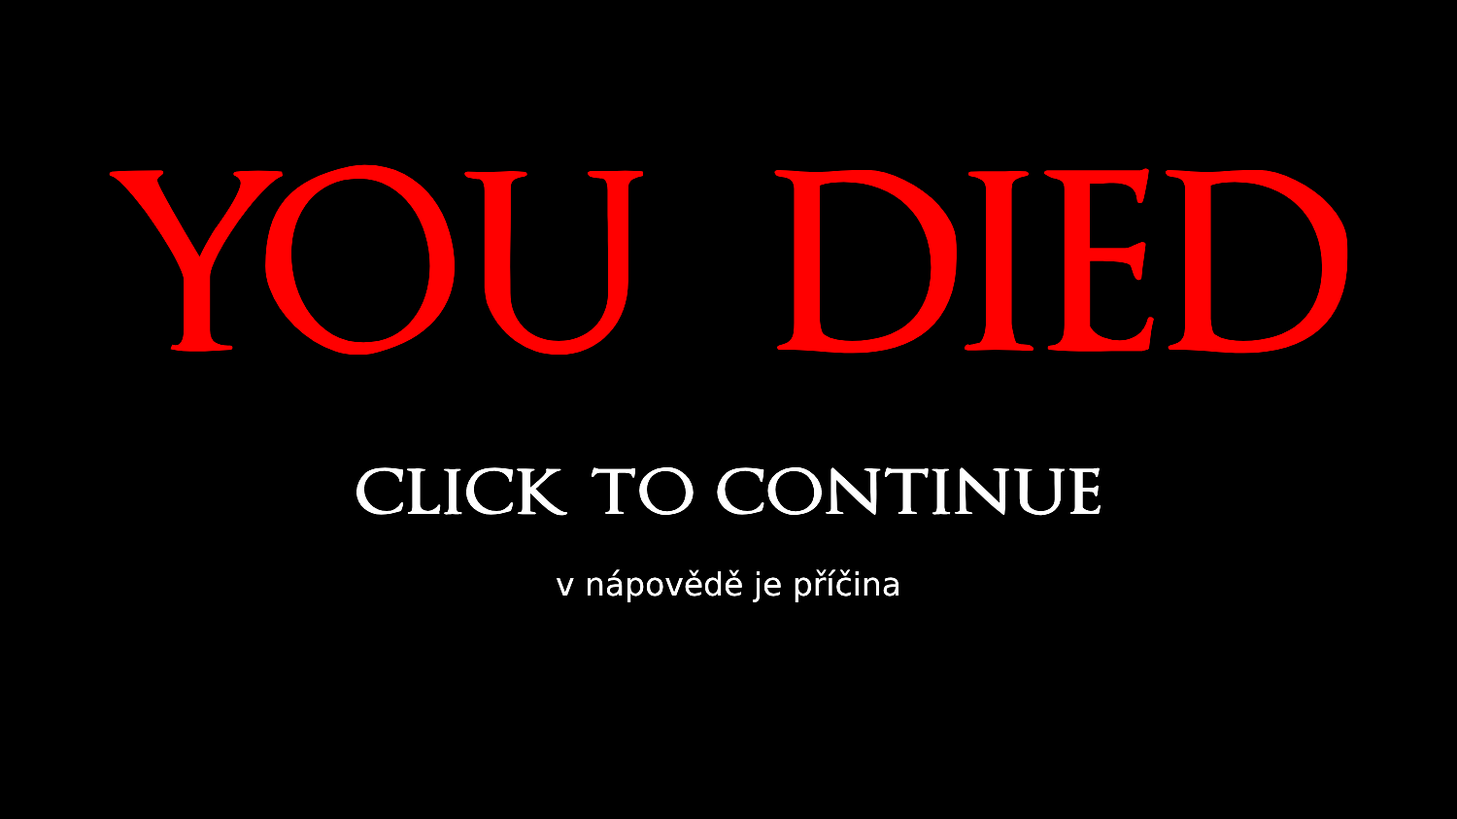
<style>
.page{position:relative;width:1457px;height:819px;background:#000000}
.page>*{position:absolute;margin:0}
.t1{font:242.8px "OptimusPrincepsSemiBold";color:#ff0000}
.t2{font:32px "DejaVuSans";color:#ffffff}
.t3{font:82.5px "OptimusPrincepsSemiBold";color:#ffffff}
</style>
<div class="page">
<p class="t1" style="left:109px;top:164px;width:1239px;height:190px">YOU  DIED</p>
<p class="t2" style="left:356px;top:466px;width:745px;height:136px;text-align:center"><span class="t3">click to continue<br><br></span>v nápovědě je příčina</p>
</div>
